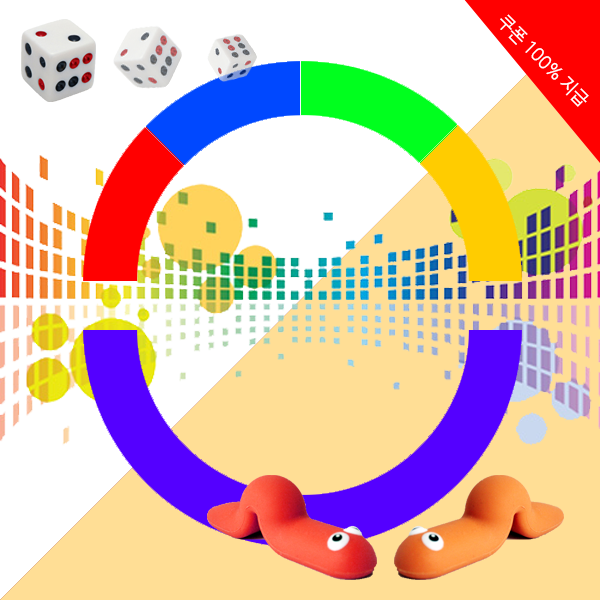
<style>
.page{position:relative;width:600px;height:600px;background:#ffde95}
.page>*{position:absolute;margin:0}
.t1{font:18px "NanumBarunGothic";color:#ffffff}
</style>
<div class="page">
<p class="t1" style="left:500px;top:14px;width:89px;height:93px;rotate:45deg">쿠폰 100% 지급</p>
</div>
